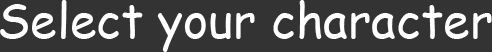
<style>
.page{position:relative;width:492px;height:52px;background:#333333}
.page>*{position:absolute;margin:0}
.t1{font:48.2px "ComicSansMS";color:#ffffff}
</style>
<div class="page">
<p class="t1" style="left:0px;top:0px;width:492px;height:52px">Select your character</p>
</div>
